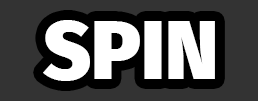
<style>
.page{position:relative;width:258px;height:101px;background:#333333}
.page>*{position:absolute;margin:0}
.t1{font:82px "FiraSans-Black";color:#ffffff}
</style>
<div class="page">
<p class="t1" style="left:43px;top:20px;width:172px;height:61px">SPIN</p>
</div>
